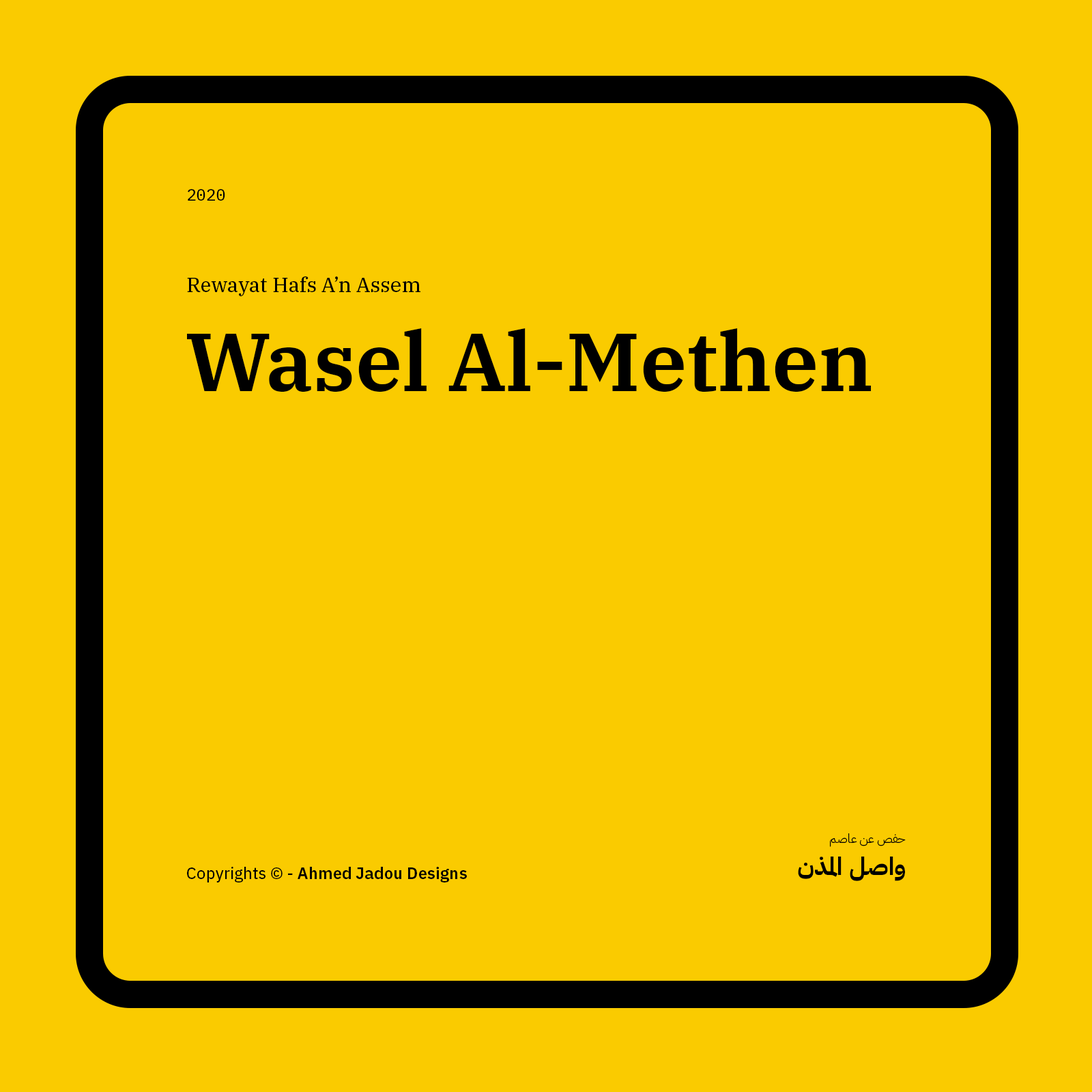
<style>
.page{position:relative;width:1092px;height:1092px;background:#facb00}
.page>*{position:absolute;margin:0}
.t1{font:16.4px "IBMPlexMono-Text";color:#000000}
.t2{font:20.5px "IBMPlexSerif-Text";color:#000000}
.t3{font:81.9px "IBMPlexSerif-SemiBold";color:#000000}
.t4{font:12.3px "IBMPlexArabic-Light";color:#000000}
.t5{font:24.6px "IBMPlexArabic-Bold";color:#000000}
.t6{font:16.4px "IBMPlexSans-SemiBold";color:#000000}
.t7{font:16.4px "IBMPlexSans-Text";color:#000000}
</style>
<div class="page">
<p class="t1" style="left:188px;top:189px;width:37px;height:12px">2020</p>
<p class="t2" style="left:187px;top:276px;width:233px;height:20px">Rewayat Hafs A’n Assem</p>
<p class="t3" style="left:187px;top:328px;width:685px;height:64px">Wasel Al-Methen</p>
<p class="t4" style="left:830px;top:833px;width:76px;height:14px">حفص عن عاصم</p>
<p class="t5" style="left:798px;top:857px;width:107px;height:24px">واصل المذن</p>
<p class="t6" style="left:187px;top:867px;width:280px;height:15px"><span class="t7">Copyrights © - </span>Ahmed Jadou Designs</p>
</div>
